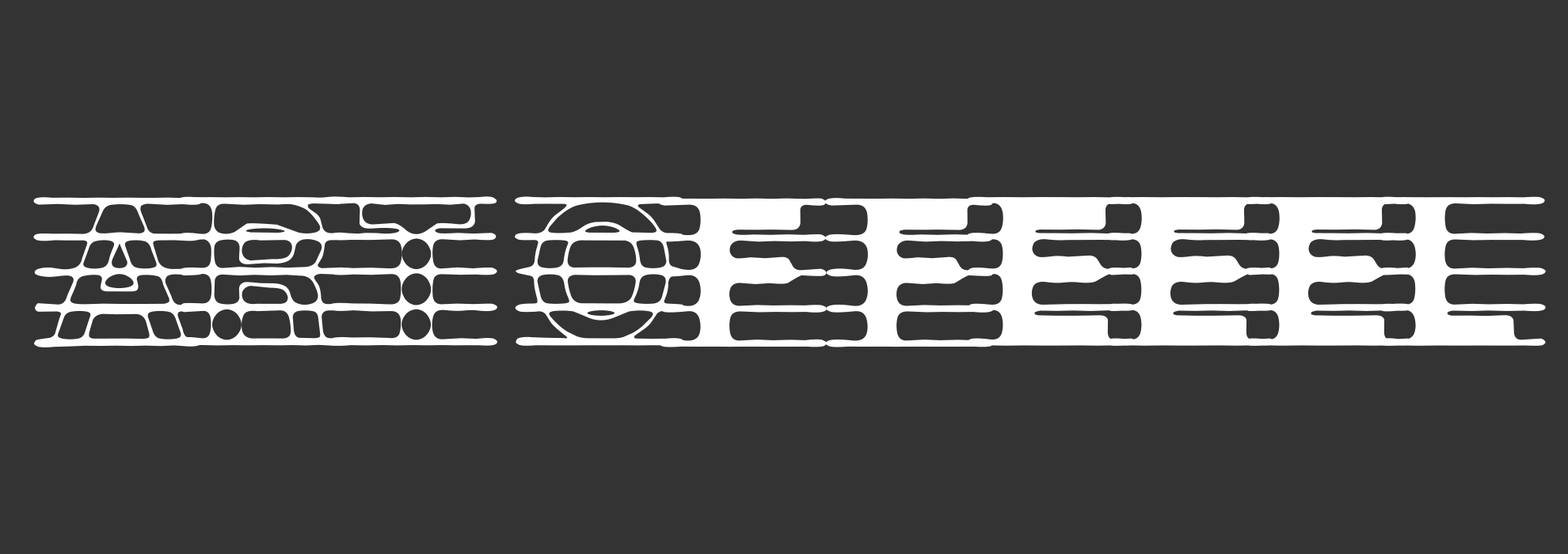
<style>
.page{position:relative;width:1568px;height:554px;background:#333333}
.page>*{position:absolute;margin:0}
.t1{font:126.7px "Schrift";color:#ffffff}
</style>
<div class="page">
<p class="t1" style="left:33px;top:196px;width:1513px;height:152px">ART Of feeel</p>
</div>
